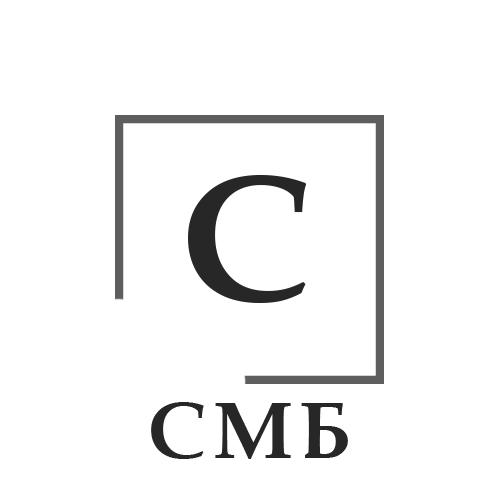
<style>
.page{position:relative;width:500px;height:500px;background:#ffffff}
.page>*{position:absolute;margin:0}
.t1{font:180px "BookAntiqua-Bold";letter-spacing:0.08em;color:#272727}
.t2{font:80px "BookAntiqua-Bold";letter-spacing:0.08em;color:#272727}
</style>
<div class="page">
<p class="t1" style="left:188px;top:175px;width:119px;height:128px">C</p>
<p class="t2" style="left:151px;top:402px;width:197px;height:57px">СМБ</p>
</div>
